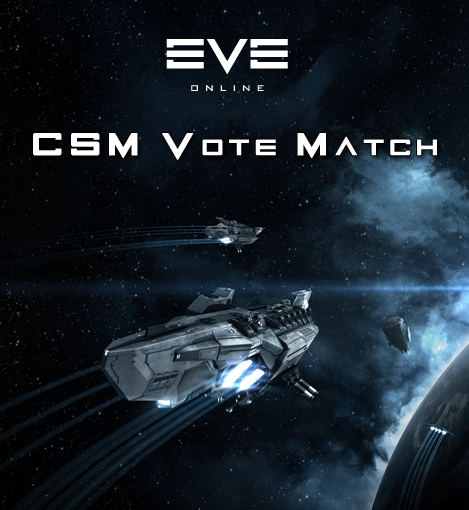
<style>
.page{position:relative;width:469px;height:510px}
.page>*{position:absolute;margin:0}
.t1{font:30px "EVEAlpha-Bold";letter-spacing:0.2em;color:#ffffff;font-variant:small-caps;font-weight:bold}
</style>
<div class="page">
<p class="t1" style="left:33px;top:133px;width:404px;height:27px">CSM Vote Match</p>
</div>
